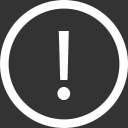
<style>
.page{position:relative;width:128px;height:128px;background:#333333}
.page>*{position:absolute;margin:0}
.t1{font:98px "Consolas";color:#ffffff}
</style>
<div class="page">
<p class="t1" style="left:57px;top:31px;width:14px;height:69px">!</p>
</div>
